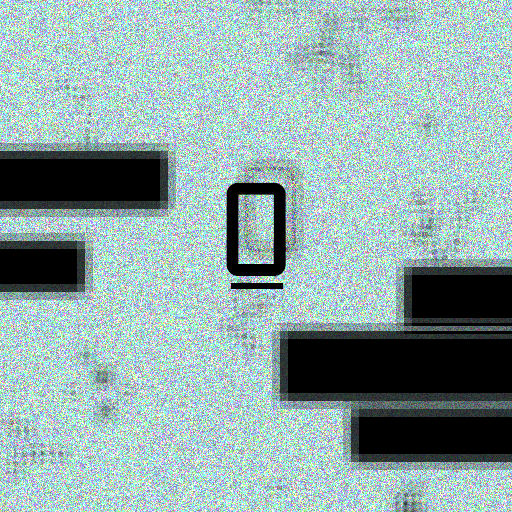
<style>
.page{position:relative;width:512px;height:512px}
.page>*{position:absolute;margin:0}
.t1{font:120px "OCRAStd";color:#000000}
</style>
<div class="page">
<p class="t1" style="left:226px;top:182px;width:60px;height:94px">0</p>
</div>
